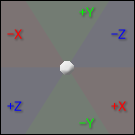
<style>
.page{position:relative;width:135px;height:135px;background:#7c7373}
.page>*{position:absolute;margin:0}
.t1{font:14px "MS-UIGothic";color:#00ff00}
.t2{font:14px "MS-UIGothic";color:#ff0000}
.t3{font:14px "MS-UIGothic";color:#0000ff}
</style>
<div class="page">
<p class="t1" style="left:79px;top:7px;width:15px;height:10px">+Y</p>
<p class="t2" style="left:7px;top:29px;width:15px;height:10px">-X</p>
<p class="t3" style="left:111px;top:29px;width:15px;height:10px">-Z</p>
<p class="t3" style="left:7px;top:101px;width:15px;height:10px">+Z</p>
<p class="t2" style="left:111px;top:101px;width:15px;height:10px">+X</p>
<p class="t1" style="left:79px;top:118px;width:15px;height:10px">-Y</p>
</div>
